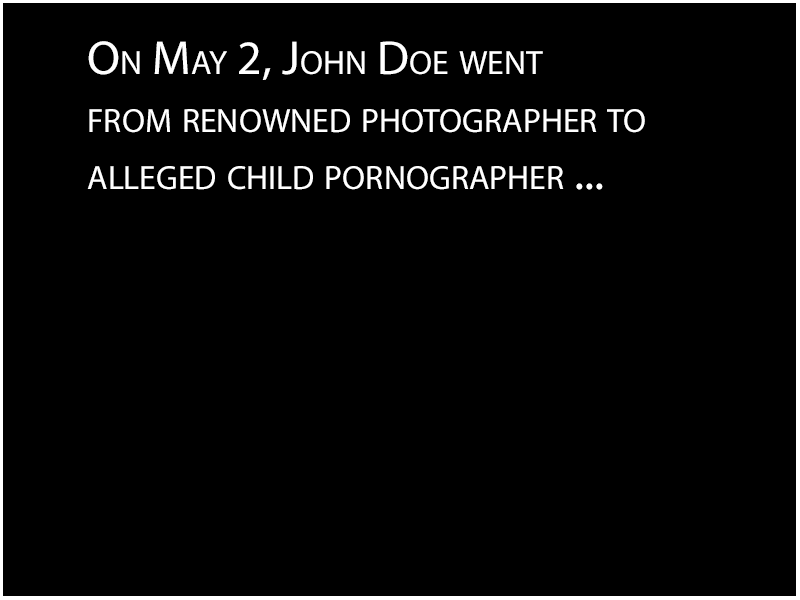
<style>
.page{position:relative;width:800px;height:600px;background:#000000}
.page>*{position:absolute;margin:0}
.t1{font:48px "MyriadPro-Regular";color:#ffffff;font-variant:small-caps}
</style>
<div class="page">
<p class="t1" style="left:87px;top:41px;width:558px;height:149px">On May 2, John Doe went <br>from renowned photographer to <br>alleged child pornographer ...</p>
</div>
